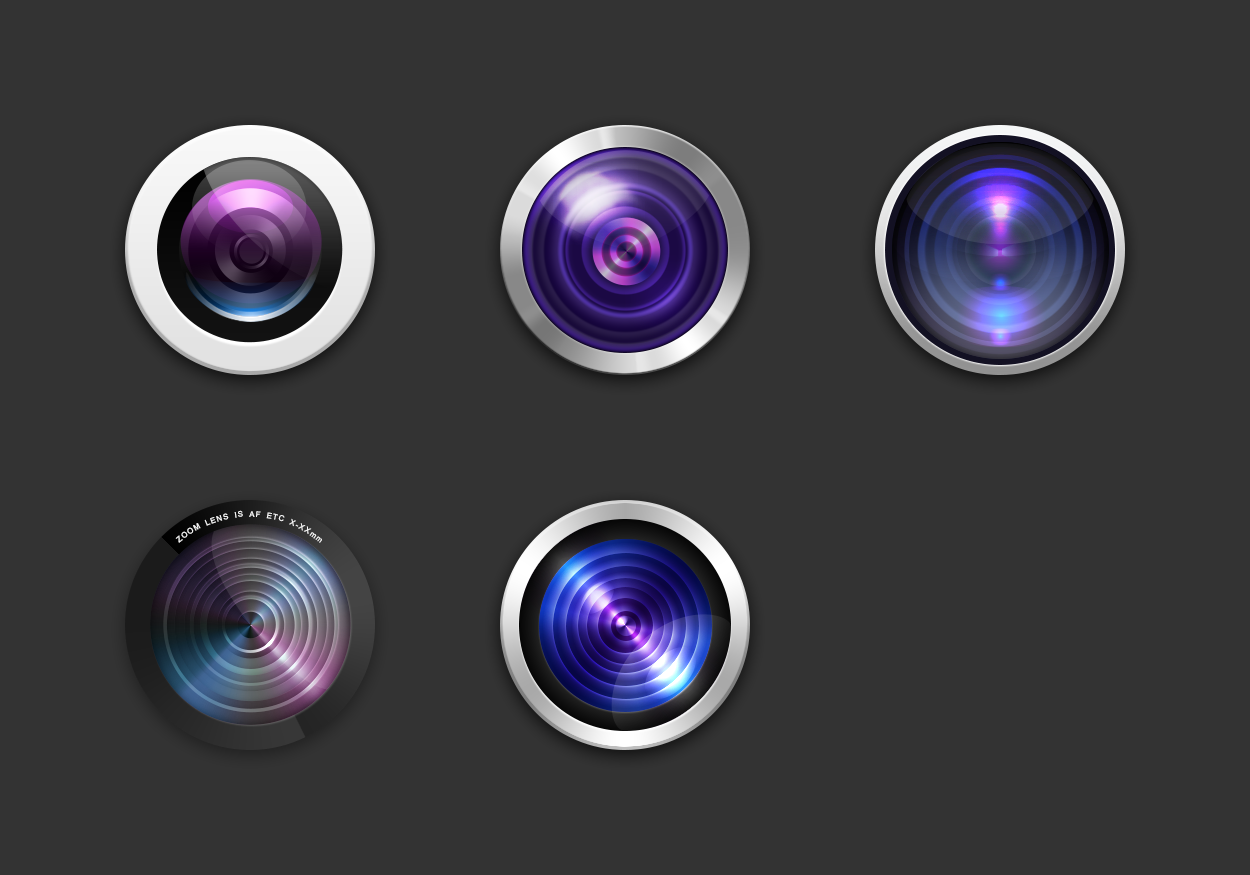
<style>
.page{position:relative;width:1250px;height:875px;background:#333333}
.page>*{position:absolute;margin:0}
.t1{font:9.1px "Latha-Bold";letter-spacing:0.06em;color:#f5f5f5}
</style>
<div class="page">
<p class="t1" style="left:175px;top:510px;width:147px;height:33px;text-align:center">ZOOM LENS IS AF ETC X-XXmm</p>
</div>
